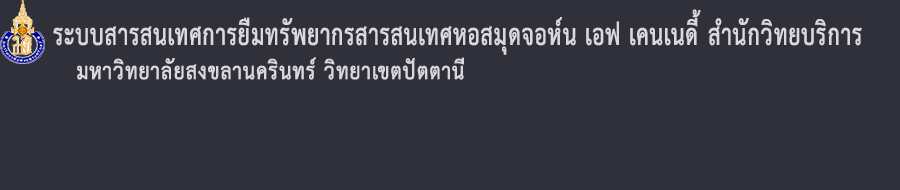
<style>
.page{position:relative;width:900px;height:190px;background:#30303a}
.page>*{position:absolute;margin:0}
.t1{font:41.8px "THSarabunPSK-Bold";color:#d8d8de;font-weight:bold;scale:0.74 1}
.t2{font:32.6px "THSarabunPSK-Bold";color:#d8d8de;font-weight:bold;scale:0.88 1}
</style>
<div class="page">
<p class="t1" style="left:53px;top:9px;width:809px;height:46px">ระบบสารสนเทศการยืมทรัพยากรสารสนเทศหอสมุดจอห์น เอฟ เคนเนดี้ สำนักวิทยบริการ</p>
<p class="t2" style="left:77px;top:57px;width:387px;height:23px">มหาวิทยาลัยสงขลานครินทร์ วิทยาเขตปัตตานี</p>
</div>
